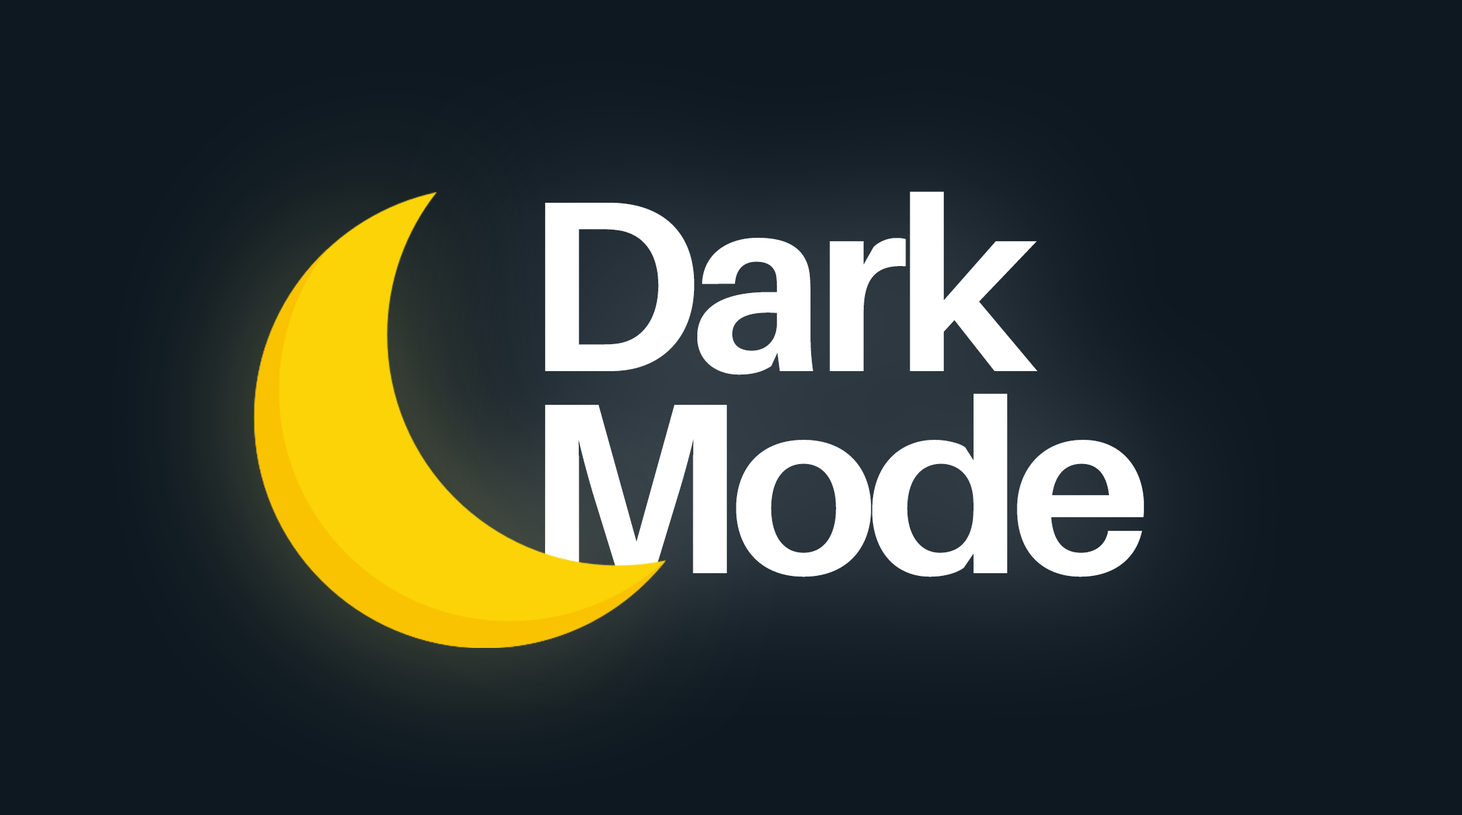
<style>
.page{position:relative;width:1462px;height:815px;background:#0d1821}
.page>*{position:absolute;margin:0}
.t1{font:244.1px/202.2px "Aileron-Bold";letter-spacing:-0.05em;color:#ffffff}
</style>
<div class="page">
<p class="t1" style="left:545px;top:191px;width:599px;height:387px">Dark<br>Mode</p>
</div>
